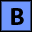
<style>
.page{position:relative;width:32px;height:32px;background:#6f97fe}
.page>*{position:absolute;margin:0}
.t1{font:24px "MyriadPro-Bold";color:#000000}
</style>
<div class="page">
<p class="t1" style="left:11px;top:8px;width:13px;height:17px">B</p>
</div>
